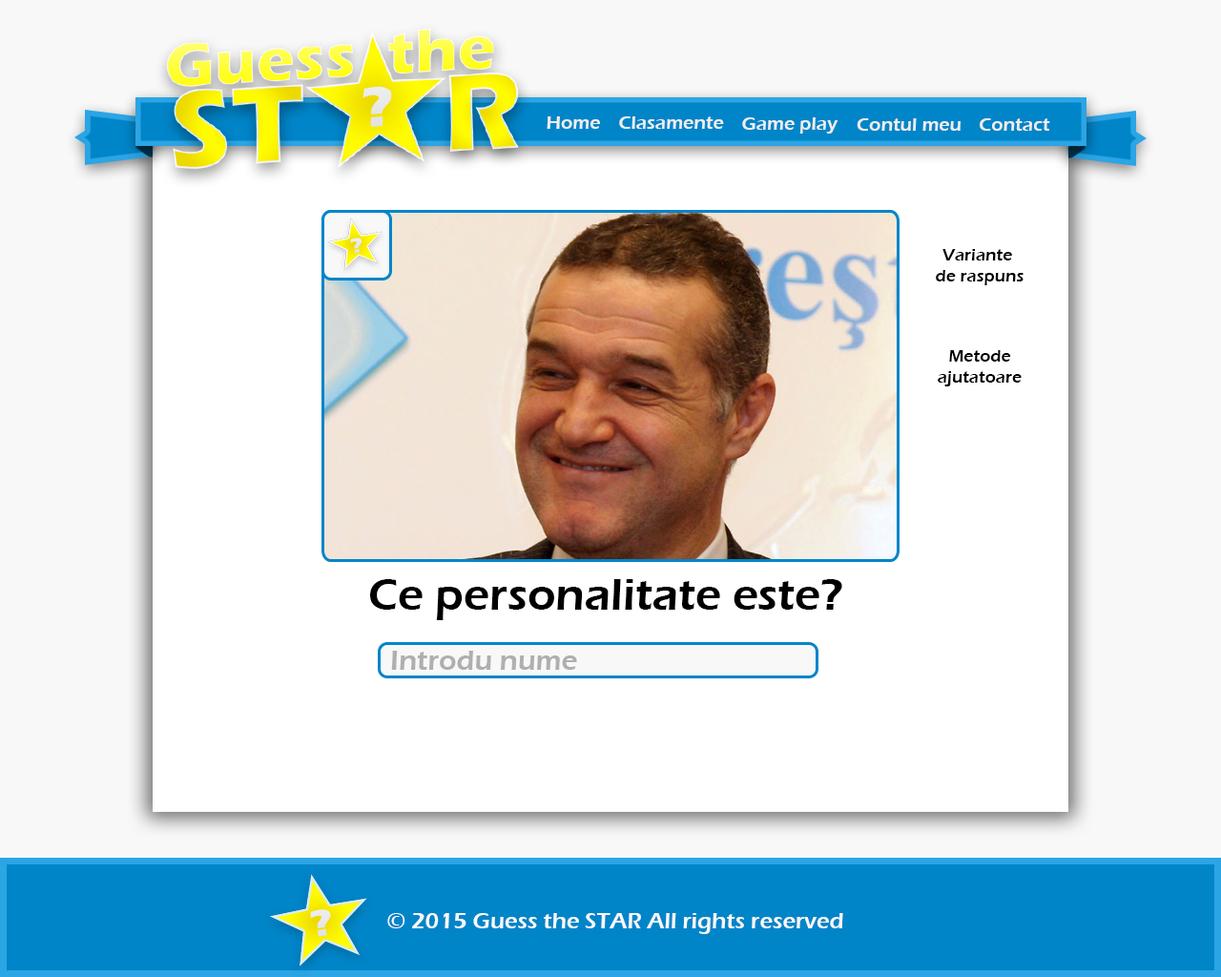
<style>
.page{position:relative;width:1221px;height:977px;background:#ffffff}
.page>*{position:absolute;margin:0}
.t1{font:19.1px "ErasITC-Demi";color:#eeeeee}
.t2{font:17.2px "ErasITC-Demi";color:#000000}
.t3{font:45.8px "ErasITC-Demi";color:#000000}
.t4{font:28.6px "ErasITC-Demi";color:#afafaf}
.t5{font:22.9px "ErasITC-Demi";color:#f8f8f8}
</style>
<div class="page">
<p class="t1" style="left:547px;top:116px;width:53px;height:13px">Home</p>
<p class="t1" style="left:619px;top:116px;width:105px;height:13px">Clasamente</p>
<p class="t1" style="left:742px;top:117px;width:96px;height:17px">Game play</p>
<p class="t1" style="left:857px;top:118px;width:103px;height:13px">Contul meu</p>
<p class="t1" style="left:980px;top:118px;width:70px;height:13px">Contact</p>
<p class="t2" style="left:936px;top:249px;width:87px;height:36px;text-align:center">Variante <br>de raspuns</p>
<p class="t2" style="left:938px;top:350px;width:84px;height:36px;text-align:center">Metode<br>ajutatoare</p>
<p class="t3" style="left:370px;top:579px;width:472px;height:41px">Ce personalitate este?</p>
<p class="t4" style="left:391px;top:650px;width:186px;height:20px">Introdu nume</p>
<p class="t5" style="left:387px;top:913px;width:456px;height:21px">© 2015 Guess the STAR All rights reserved</p>
</div>
